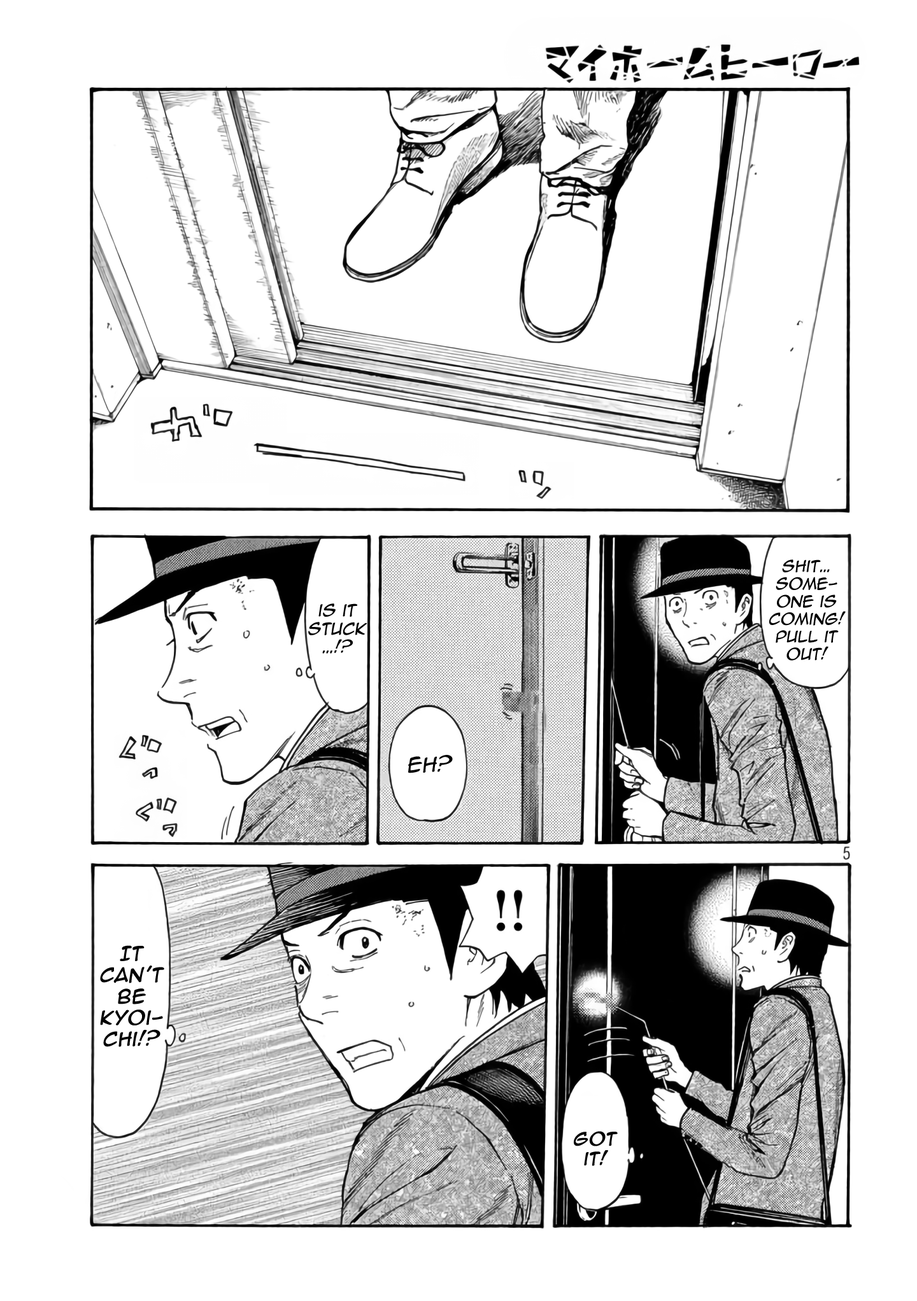
<style>
.page{position:relative;width:917px;height:1301px;background:#ffffff}
.page>*{position:absolute;margin:0}
.t1{font:14.6px "AnimeAce2.0BB";color:#030303;font-style:italic}
.t2{font:15.3px "AnimeAce2.0BB";color:#030303;font-style:italic}
.t3{font:19.1px "AnimeAce2.0BB";color:#030303;font-style:italic}
.t4{font:17.8px "AnimeAce2.0BB";color:#030303;font-weight:bold;font-style:italic}
.t5{font:16.5px "AnimeAce2.0BB";color:#030303;font-weight:bold;font-style:italic}
</style>
<div class="page">
<p class="t1" style="left:768px;top:559px;width:77px;height:102px;text-align:center">Shit… Someone is coming! Pull it out!</p>
<p class="t2" style="left:308px;top:603px;width:59px;height:51px;text-align:center">is it Stuck<br>…!?</p>
<p class="t3" style="left:408px;top:755px;width:45px;height:18px">Eh?</p>
<p class="t4" style="left:100px;top:945px;width:64px;height:102px;text-align:center">It can’t be Kyoichi!?</p>
<p class="t5" style="left:573px;top:1131px;width:44px;height:35px;text-align:center">got it!</p>
</div>
